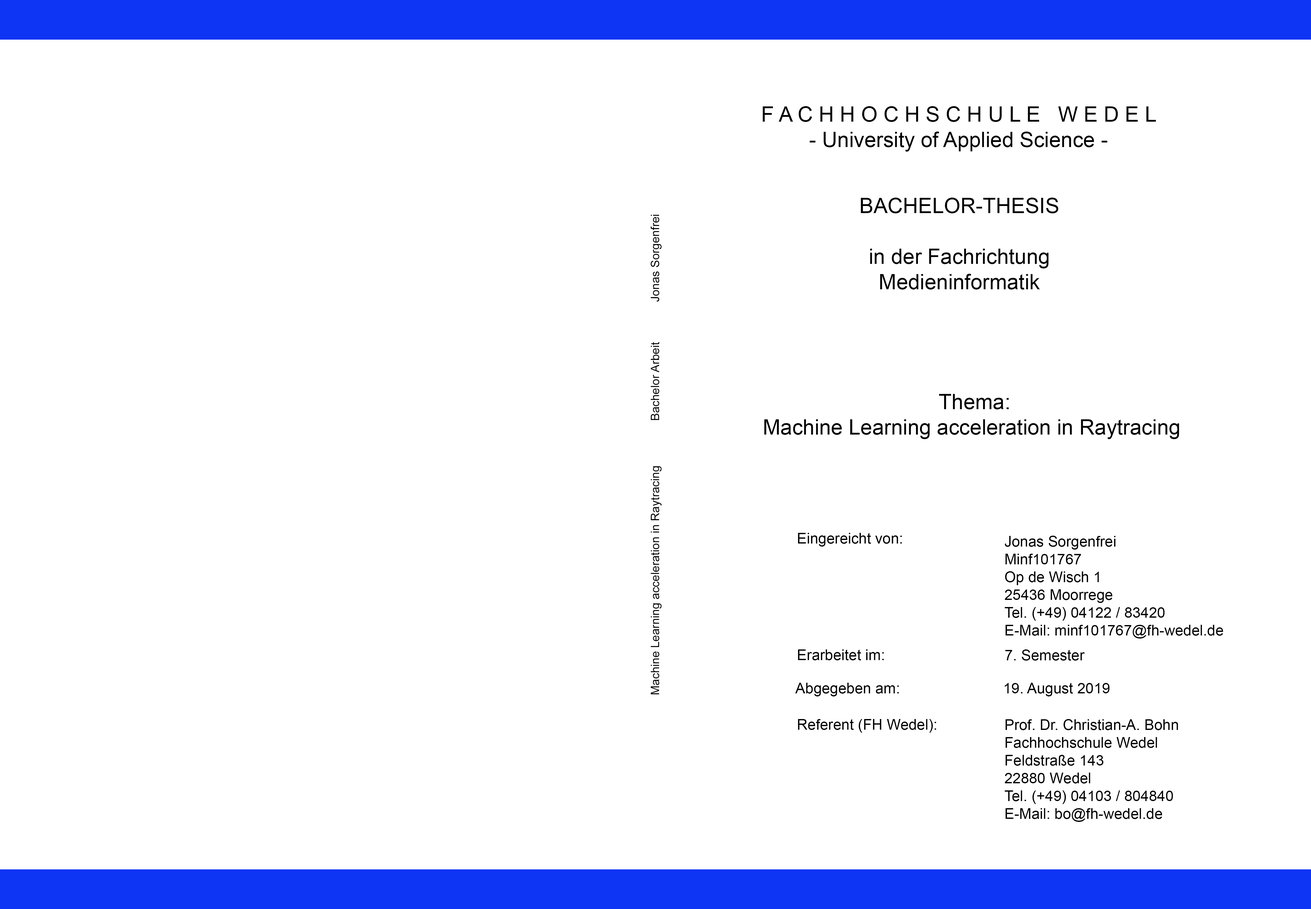
<style>
.page{position:relative;width:1311px;height:909px;background:#ffffff}
.page>*{position:absolute;margin:0}
.t1{font:21.2px "ArialMT";color:#000000}
.t2{font:11.6px "ArialMT";color:#000000}
.t3{font:14.8px "ArialMT";color:#000000}
</style>
<div class="page">
<p class="t1" style="left:763px;top:106px;width:393px;height:46px;text-align:center">F A C H H O C H S C H U L E   W E D E L<br>- University of Applied Science -</p>
<p class="t1" style="left:861px;top:198px;width:197px;height:92px;text-align:center">BACHELOR-THESIS<br><br>in der Fachrichtung<br>Medieninformatik</p>
<p class="t2" style="left:651px;top:215px;width:11px;height:480px;rotate:-90deg">Machine Learning acceleration in Raytracing     Bachelor Arbeit     Jonas Sorgenfrei</p>
<p class="t1" style="left:765px;top:394px;width:414px;height:45px;text-align:center">Thema:<br>Machine Learning acceleration in Raytracing</p>
<p class="t3" style="left:798px;top:533px;width:104px;height:14px">Eingereicht von:</p>
<p class="t3" style="left:1005px;top:536px;width:218px;height:103px">Jonas Sorgenfrei<br>Minf101767<br>Op de Wisch 1<br>25436 Moorrege<br>Tel. (+49) 04122 / 83420<br>E-Mail: minf101767@fh-wedel.de</p>
<p class="t3" style="left:798px;top:650px;width:86px;height:11px">Erarbeitet im:</p>
<p class="t3" style="left:1005px;top:650px;width:80px;height:11px">7. Semester</p>
<p class="t3" style="left:795px;top:683px;width:104px;height:14px">Abgegeben am:</p>
<p class="t3" style="left:1005px;top:683px;width:105px;height:14px">19. August 2019</p>
<p class="t3" style="left:798px;top:719px;width:138px;height:14px">Referent (FH Wedel):</p>
<p class="t3" style="left:1005px;top:719px;width:173px;height:103px">Prof. Dr. Christian-A. Bohn<br>Fachhochschule Wedel<br>Feldstraße 143<br>22880 Wedel<br>Tel. (+49) 04103 / 804840<br>E-Mail: bo@fh-wedel.de</p>
</div>
